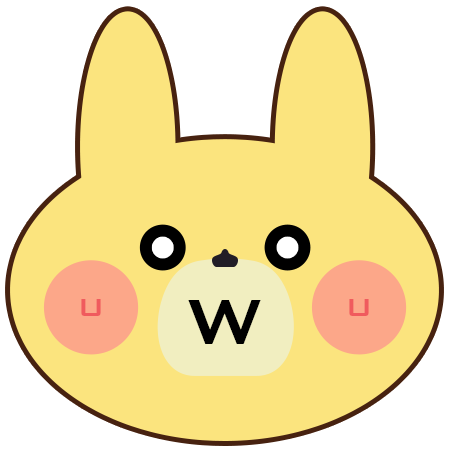
<style>
.page{position:relative;width:449px;height:449px;background:#fbe47e}
.page>*{position:absolute;margin:0}
.t1{font:33px "BankGothicBT-Medium";color:#f05b5e}
.t2{font:85.2px "BankGothicBT-Medium";color:#000000}
</style>
<div class="page">
<p class="t1" style="left:81px;top:299px;width:20px;height:17px">U</p>
<p class="t2" style="left:188px;top:300px;width:73px;height:44px">W</p>
<p class="t1" style="left:349px;top:299px;width:20px;height:17px">U</p>
</div>
